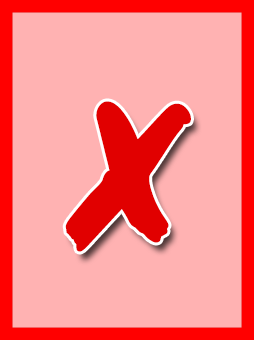
<style>
.page{position:relative;width:254px;height:340px;background:#ffb2b2}
.page>*{position:absolute;margin:0}
.t1{font:200px "ArialUnicodeMS";color:#e10000}
</style>
<div class="page">
<p class="t1" style="left:65px;top:101px;width:126px;height:151px">✘</p>
</div>
